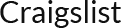
<style>
.page{position:relative;width:121px;height:28px;background:#ffffff}
.page>*{position:absolute;margin:0}
.t1{font:30px "Lato-Regular";color:#111111}
</style>
<div class="page">
<p class="t1" style="left:0px;top:0px;width:121px;height:28px">Craigslist</p>
</div>
